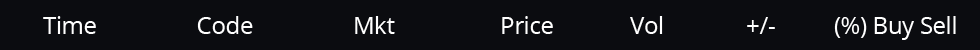
<style>
.page{position:relative;width:980px;height:50px;background:#0b0c10}
.page>*{position:absolute;margin:0}
.t1{font:24px "OpenSans";letter-spacing:-0.015em;color:#ffffff}
</style>
<div class="page">
<p class="t1" style="left:43px;top:16px;width:913px;height:24px">Time                 Code                 Mkt                  Price             Vol              +/-          (%) Buy Sell</p>
</div>
